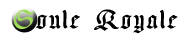
<style>
.page{position:relative;width:184px;height:42px;background:#ffffff}
.page>*{position:absolute;margin:0}
.t1{font:30px "OldGermen";letter-spacing:0.05em;color:#000000}
.t2{font:30px "OldGermen";letter-spacing:0.05em;color:#9fda58}
</style>
<div class="page">
<p class="t1" style="left:14px;top:9px;width:164px;height:25px"><span class="t2">S</span>oule Royale</p>
</div>
